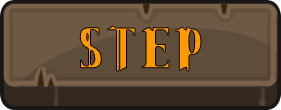
<style>
.page{position:relative;width:281px;height:110px;background:#5e4d3a}
.page>*{position:absolute;margin:0}
.t1{font:60px "Hangyaku";letter-spacing:0.1em;color:#ff9900;font-weight:bold}
</style>
<div class="page">
<p class="t1" style="left:79px;top:25px;width:123px;height:47px">STEP</p>
</div>
